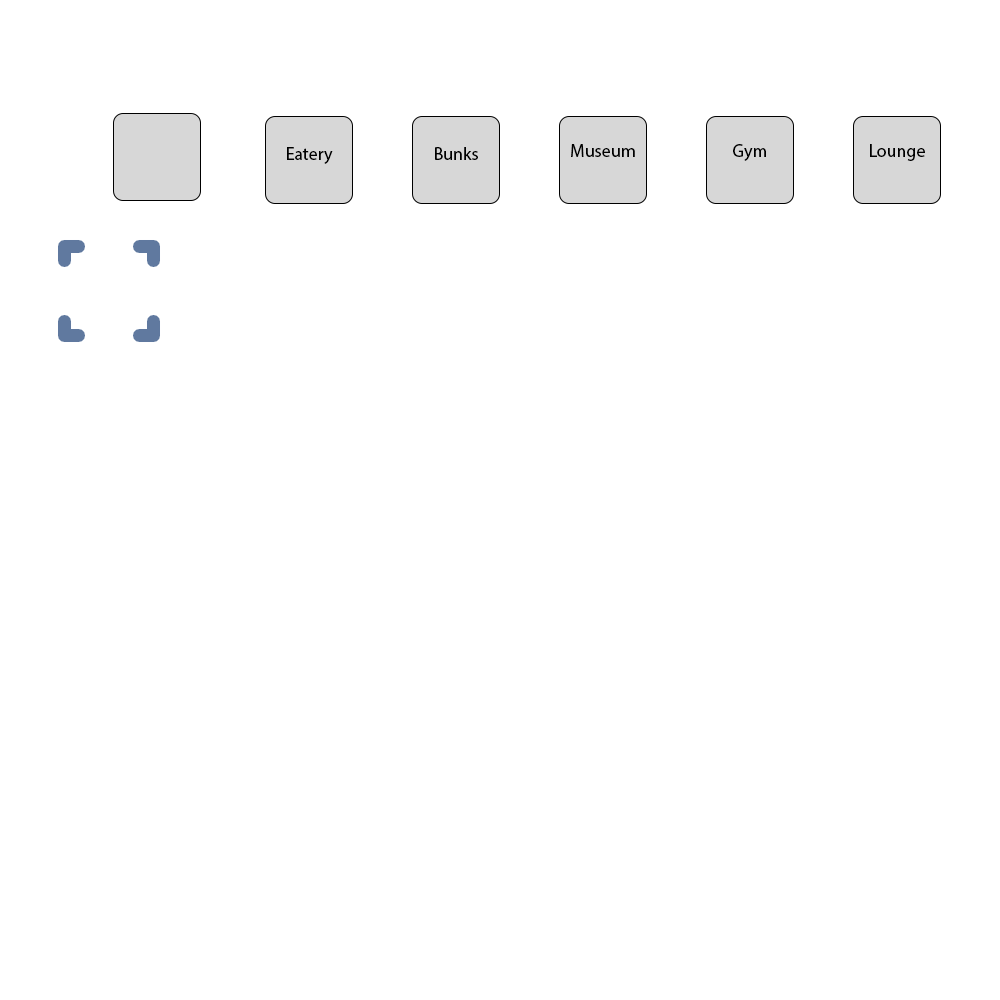
<style>
.page{position:relative;width:1000px;height:1000px;background:#ffffff}
.page>*{position:absolute;margin:0}
.t1{font:18px "MyriadPro-Regular";color:#000000}
</style>
<div class="page">
<p class="t1" style="left:287px;top:147px;width:46px;height:17px">Eatery</p>
<p class="t1" style="left:435px;top:147px;width:43px;height:13px">Bunks</p>
<p class="t1" style="left:571px;top:144px;width:64px;height:13px">Museum</p>
<p class="t1" style="left:733px;top:144px;width:33px;height:17px">Gym</p>
<p class="t1" style="left:870px;top:144px;width:55px;height:17px">Lounge</p>
</div>
